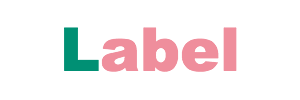
<style>
.page{position:relative;width:300px;height:100px;background:#ffffff}
.page>*{position:absolute;margin:0}
.t1{font:60px "Arial-Black";color:#ef8e9c}
.t2{font:60px "Arial-Black";color:#009074}
</style>
<div class="page">
<p class="t1" style="left:64px;top:27px;width:173px;height:45px"><span class="t2">L</span>abel</p>
</div>
